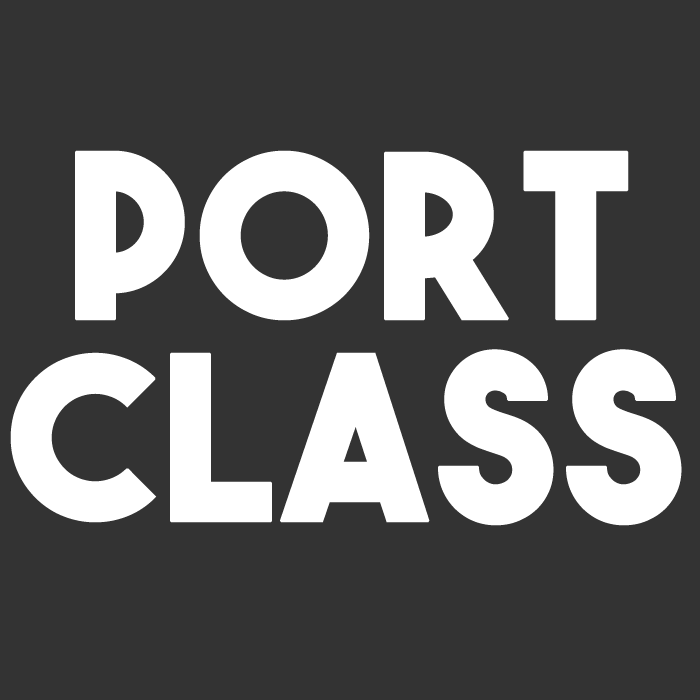
<style>
.page{position:relative;width:700px;height:700px;background:#333333}
.page>*{position:absolute;margin:0}
.t1{font:227.4px/67.4px "TheBoldFont";color:#ffffff;font-weight:bold}
</style>
<div class="page">
<p class="t1" style="left:10px;top:150px;width:672px;height:376px;text-align:center">Port<br><br><br>Class</p>
</div>
